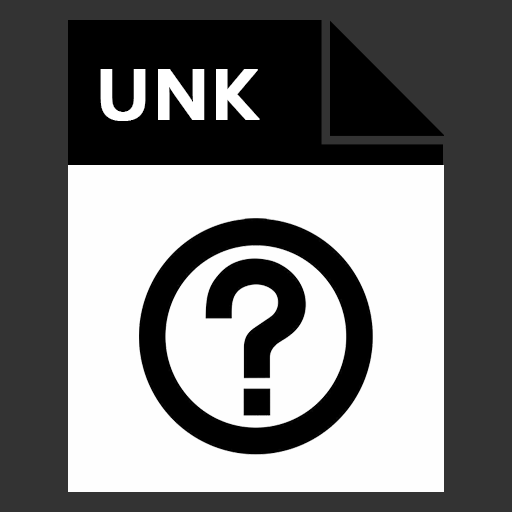
<style>
.page{position:relative;width:512px;height:512px;background:#fefefe}
.page>*{position:absolute;margin:0}
.t1{font:77.5px "Corbel-Bold";color:#ffffff;font-weight:bold}
</style>
<div class="page">
<p class="t1" style="left:100px;top:69px;width:160px;height:52px">UNK</p>
</div>
